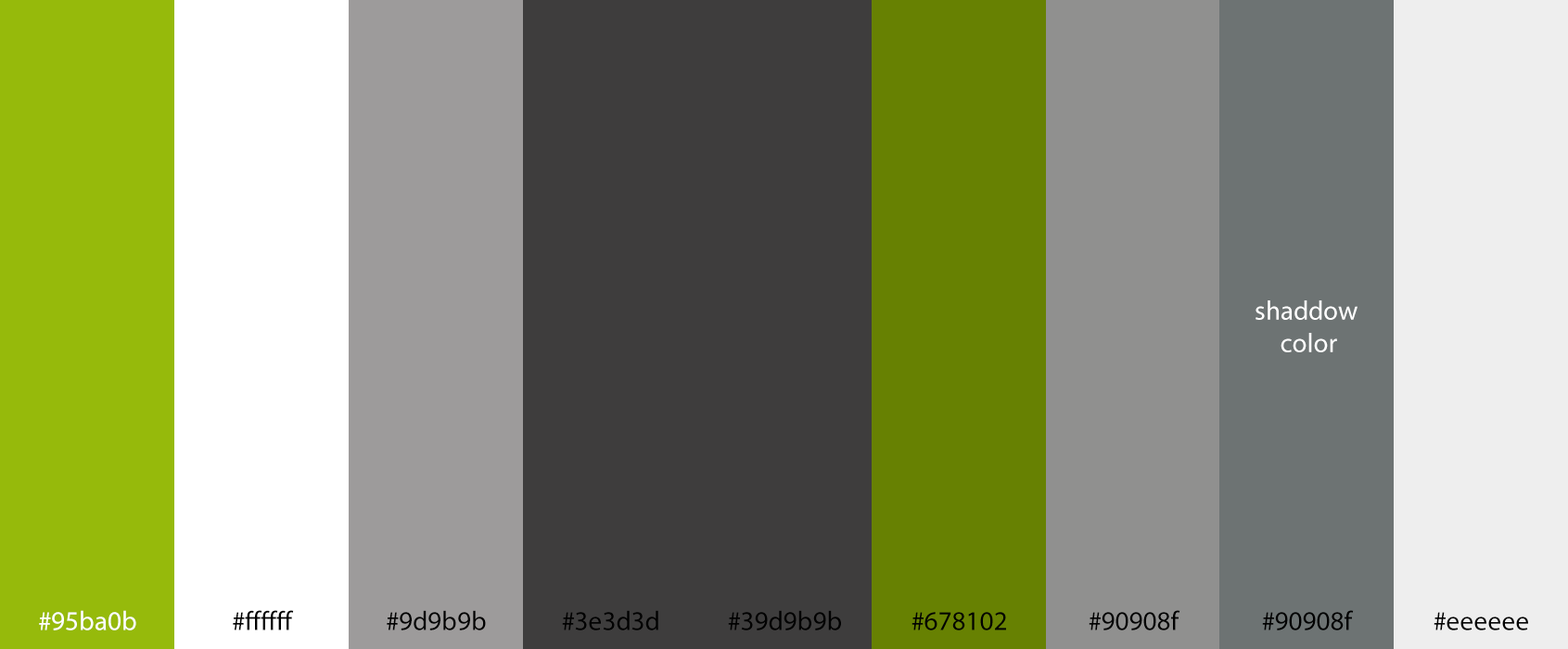
<style>
.page{position:relative;width:1568px;height:649px;background:#3e3d3d}
.page>*{position:absolute;margin:0}
.t1{font:27px "MyriadPro-Regular";color:#ffffff}
.t2{font:27px "MyriadPro-Regular";color:#010101}
</style>
<div class="page">
<p class="t1" style="left:1256px;top:300px;width:102px;height:52px;text-align:center">shaddow<br> color</p>
<p class="t1" style="left:39px;top:610px;width:97px;height:21px">#95ba0b</p>
<p class="t2" style="left:233px;top:610px;width:61px;height:21px">#ffffff</p>
<p class="t2" style="left:387px;top:610px;width:99px;height:21px">#9d9b9b</p>
<p class="t2" style="left:562px;top:610px;width:96px;height:21px">#3e3d3d</p>
<p class="t2" style="left:728px;top:610px;width:113px;height:21px">#39d9b9b</p>
<p class="t2" style="left:911px;top:612px;width:95px;height:19px">#678102</p>
<p class="t2" style="left:1089px;top:610px;width:91px;height:21px">#90908f</p>
<p class="t2" style="left:1262px;top:610px;width:92px;height:21px">#90908f</p>
<p class="t2" style="left:1434px;top:612px;width:94px;height:19px">#eeeeee</p>
</div>
